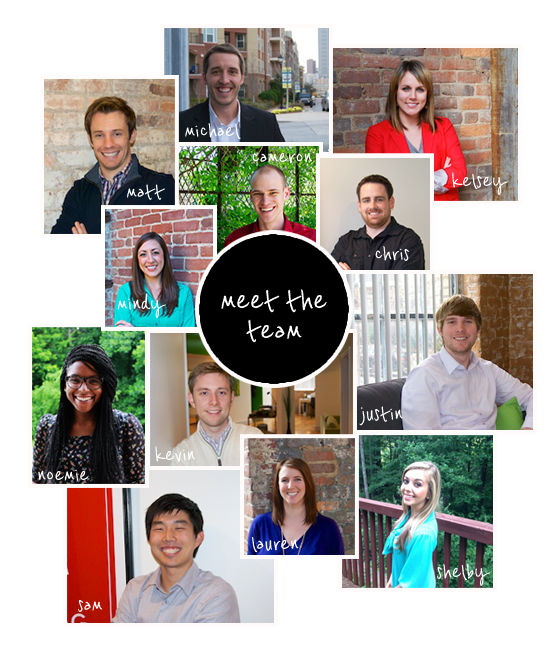
<style>
.page{position:relative;width:551px;height:645px;background:#ffffff}
.page>*{position:absolute;margin:0}
.t1{font:16.4px "PizzabyAlfredo";color:#ffffff}
.t2{font:24px/30px "PizzabyAlfredo";color:#ffffff}
</style>
<div class="page">
<p class="t1" style="left:185px;top:123px;width:56px;height:16px">michael</p>
<p class="t1" style="left:252px;top:152px;width:61px;height:12px">cameron</p>
<p class="t1" style="left:452px;top:172px;width:56px;height:23px">kelsey</p>
<p class="t1" style="left:127px;top:184px;width:38px;height:16px">matt</p>
<p class="t1" style="left:375px;top:246px;width:34px;height:15px">chris</p>
<p class="t1" style="left:117px;top:293px;width:49px;height:25px">mindy</p>
<p class="t2" style="left:221px;top:289px;width:106px;height:54px;text-align:center">meet the<br>team</p>
<p class="t1" style="left:359px;top:406px;width:44px;height:20px">justin</p>
<p class="t1" style="left:155px;top:446px;width:41px;height:16px">kevin</p>
<p class="t1" style="left:38px;top:469px;width:51px;height:12px">noemie</p>
<p class="t1" style="left:252px;top:536px;width:47px;height:16px">lauren</p>
<p class="t1" style="left:437px;top:563px;width:53px;height:23px">shelby</p>
<p class="t1" style="left:78px;top:600px;width:25px;height:12px">sam</p>
</div>
